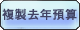
<style>
.page{position:relative;width:80px;height:30px}
.page>*{position:absolute;margin:0}
.t1{font:12px "DFHei-Bd-HK-BF";letter-spacing:0.05em;color:#424363}
</style>
<div class="page">
<p class="t1" style="left:2px;top:8px;width:75px;height:12px">複製去年預算</p>
</div>
